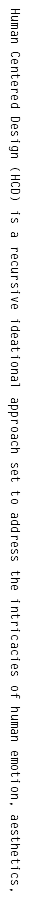
<style>
.page{position:relative;width:30px;height:900px;background:#ffffff}
.page>*{position:absolute;margin:0}
.t1{font:12px "LetterGothicStd";color:#000000}
</style>
<div class="page">
<p class="t1" style="left:7px;top:9px;width:14px;height:882px;rotate:90deg">Human Centered Design (HCD) is a recursive ideational approach set to address the intricacies of human emotion, aesthetics,</p>
</div>
